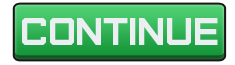
<style>
.page{position:relative;width:235px;height:65px}
.page>*{position:absolute;margin:0}
.t1{font:38px "Furore";color:#ecf0f1}
</style>
<div class="page">
<p class="t1" style="left:22px;top:18px;width:196px;height:27px">CONTINUE</p>
</div>
